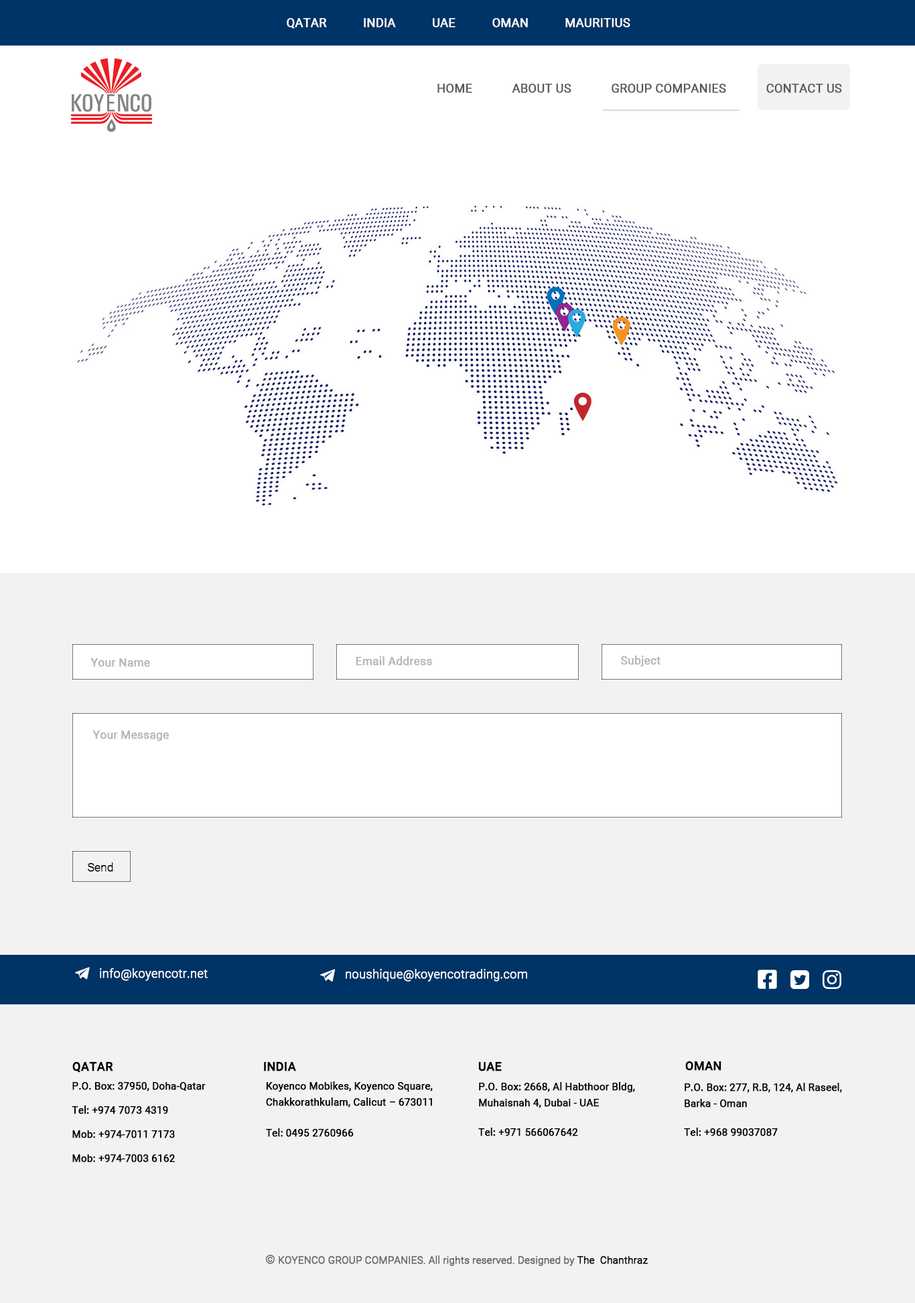
<style>
.page{position:relative;width:915px;height:1303px;background:#f2f2f2}
.page>*{position:absolute;margin:0}
.t1{font:12.1px "Roboto-Regular";color:#ffffff;font-weight:bold}
.t2{font:12.1px "Roboto-Regular";color:#5a5959;font-weight:bold}
.t3{font:11.4px "Roboto-Regular";color:#b6b5b5;font-weight:bold}
.t4{font:11.4px "Roboto-Thin";color:#000000;font-weight:bold}
.t5{font:12.1px "Roboto-Light";color:#ffffff;font-weight:bold}
.t6{font:12.1px "Roboto-Medium";color:#000000;font-weight:bold}
.t7{font:10px/12.1px "Roboto-Regular";color:#000000;font-weight:bold}
.t8{font:10px/16.1px "Roboto-Regular";color:#000000;font-weight:bold}
.t9{font:10px/24.1px "Roboto-Regular";color:#000000;font-weight:bold}
.t10{font:10px/30.8px "Roboto-Regular";color:#000000;font-weight:bold}
.t11{font:10px/13.4px "Roboto-Regular";color:#000000;font-weight:bold}
.t12{font:10px/12.7px "Roboto-Regular";color:#000000;font-weight:bold}
.t13{font:10px "Roboto-Light";color:#666666;font-weight:bold}
.t14{font:12.1px "Roboto-Light";color:#666666;font-weight:bold}
.t15{font:10px "Roboto-Light";color:#000000;font-weight:bold}
</style>
<div class="page">
<p class="t1" style="left:287px;top:18px;width:343px;height:11px">QATAR           INDIA           UAE           OMAN           MAURITIUS</p>
<p class="t2" style="left:437px;top:84px;width:405px;height:9px">HOME            ABOUT US            GROUP COMPANIES            CONTACT US</p>
<p class="t3" style="left:90px;top:658px;width:60px;height:9px">Your Name</p>
<p class="t3" style="left:356px;top:656px;width:76px;height:10px">Email Address</p>
<p class="t3" style="left:621px;top:656px;width:39px;height:11px">Subject</p>
<p class="t3" style="left:92px;top:731px;width:77px;height:10px">Your Message</p>
<p class="t4" style="left:88px;top:863px;width:25px;height:9px">Send</p>
<p class="t5" style="left:100px;top:968px;width:108px;height:13px">info@koyencotr.net</p>
<p class="t5" style="left:346px;top:969px;width:181px;height:13px">noushique@koyencotrading.com</p>
<p class="t6" style="left:685px;top:1062px;width:36px;height:9px">OMAN</p>
<p class="t6" style="left:72px;top:1062px;width:41px;height:11px">QATAR</p>
<p class="t6" style="left:264px;top:1062px;width:32px;height:10px">INDIA</p>
<p class="t6" style="left:478px;top:1062px;width:24px;height:10px">UAE</p>
<p class="t7" style="left:72px;top:1082px;width:134px;height:81px">P.O. Box: 37950, Doha-Qatar<br><br>Tel: +974 7073 4319<br><br>Mob: +974-7011 7173<br><br>Mob: +974-7003 6162</p>
<p class="t8" style="left:266px;top:1082px;width:167px;height:55px"><span class="t9"><br><br></span>Koyenco Mobikes, Koyenco Square, <br>Chakkorathkulam, Calicut – 673011<br><span class="t10">Tel: 0495 2760966</span></p>
<p class="t8" style="left:478px;top:1082px;width:157px;height:55px">P.O. Box: 2668, Al Habthoor Bldg, Muhaisnah 4, Dubai - UAE<br><br><span class="t11">Tel: +971 566067642</span></p>
<p class="t8" style="left:684px;top:1083px;width:158px;height:54px">P.O. Box: 277, R.B, 124, Al Raseel, Barka - Oman<br><br><span class="t12">Tel: +968 99037087<br></span>V</p>
<p class="t13" style="left:265px;top:1255px;width:383px;height:12px"><span class="t14">©</span> KOYENCO GROUP COMPANIES. All rights reserved. Designed by<span class="t15"> The  Chanthraz</span></p>
</div>
